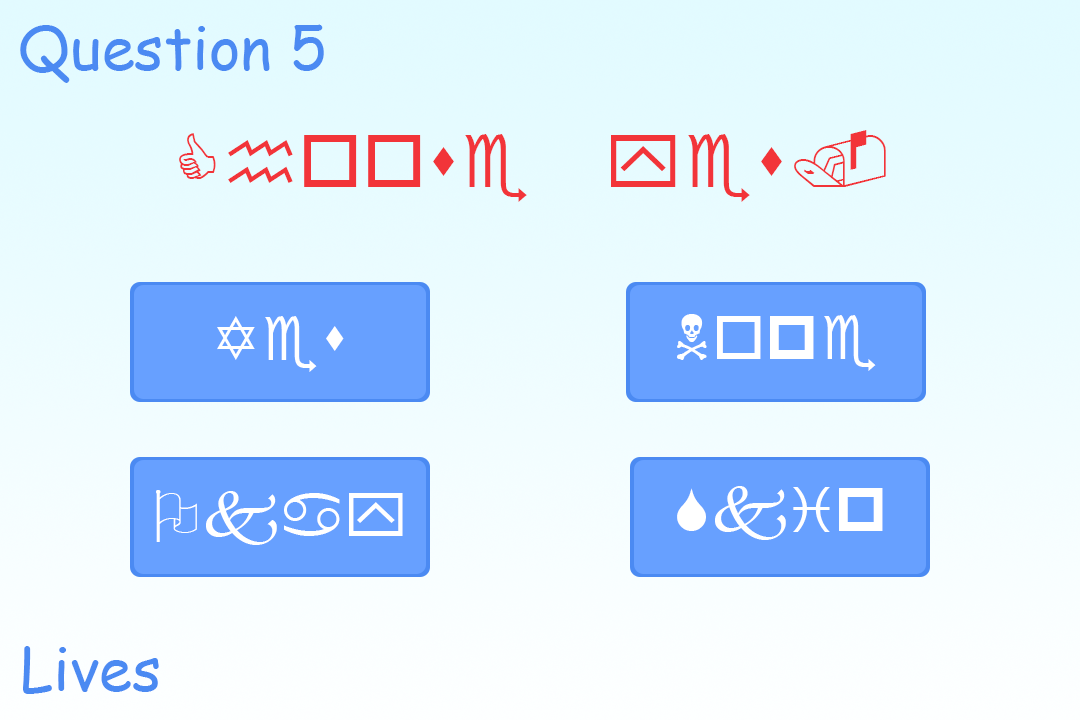
<style>
.page{position:relative;width:1080px;height:720px}
.page>*{position:absolute;margin:0}
.t1{font:60px "ComicSansMS";color:#4b8af2}
.t2{font:59.6px "ComicSansMS";color:#4b8af2}
</style>
<div class="page">
<p class="t1" style="left:20px;top:24px;width:304px;height:59px">Question 5</p>
<p class="t2" style="left:23px;top:646px;width:136px;height:48px">Lives</p>
</div>
